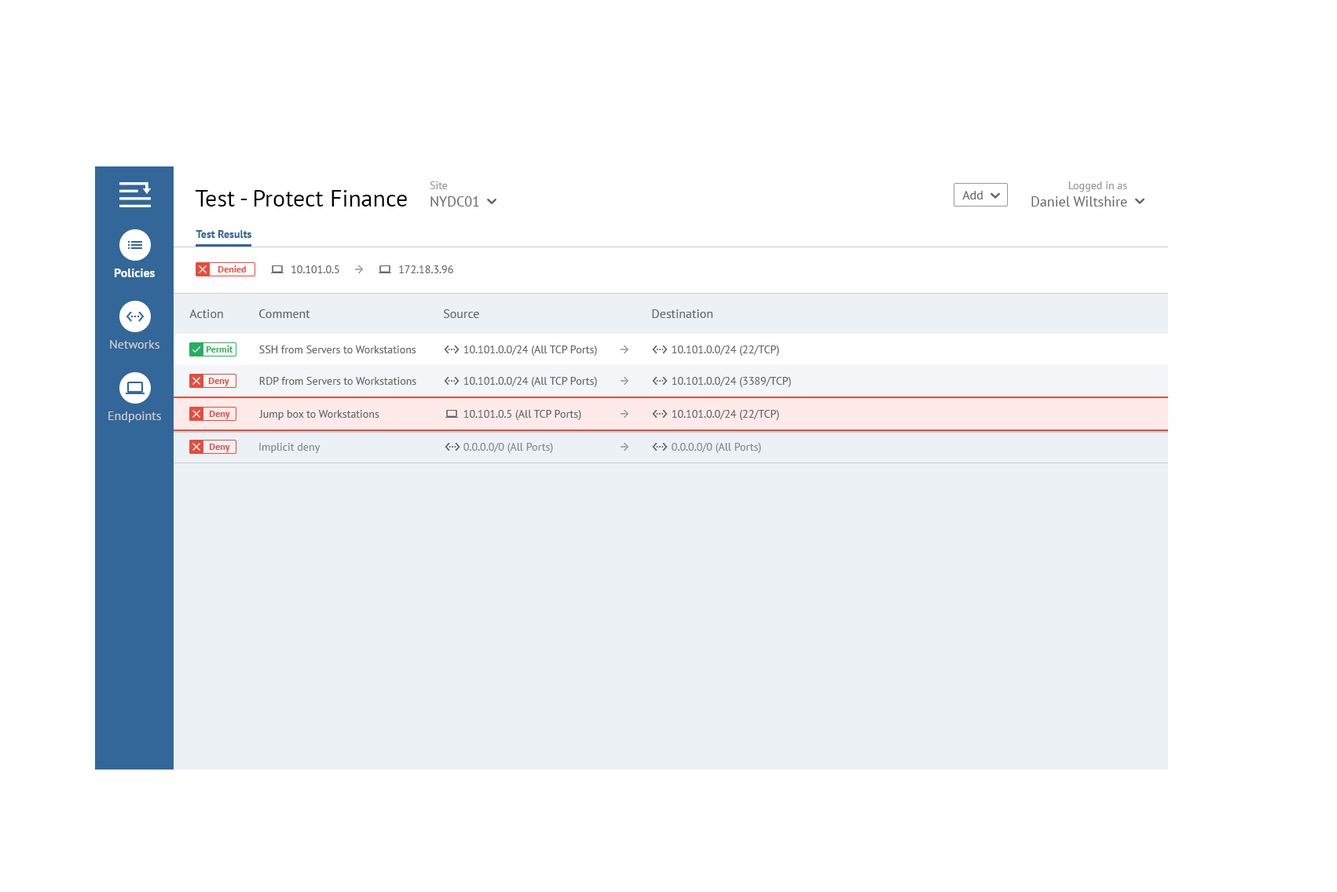
<style>
.page{position:relative;width:1337px;height:892px;background:#ffffff}
.page>*{position:absolute;margin:0}
.t1{font:14.1px "PTSans-Regular";color:#666666}
.t2{font:11px "PTSans-Regular";color:#999999}
.t3{font:14.3px "PTSans-Regular";color:#666666}
.t4{font:11.1px "PTSans-Regular";color:#999999}
.t5{font:23.6px "PTSans-Regular";color:#000000}
.t6{font:12.6px "PTSans-Regular";color:#666666}
.t7{font:10.9px "PTSans-Bold";color:#336699}
.t8{font:12.6px "PTSans-Bold";color:#ffffff}
.t9{font:9.4px "PTSans-Bold";color:#e74c3c}
.t10{font:11px "PTSans-Regular";color:#666666}
.t11{font:12.6px "PTSans-Regular";color:#cccccc}
.t12{font:9.4px "PTSans-Bold";color:#27ae60}
.t13{font:11px "PTSans-Regular";color:#888888}
</style>
<div class="page">
<p class="t1" style="left:430px;top:181px;width:49px;height:26px"><span class="t2">Site<br></span>NYDC01</p>
<p class="t3" style="left:1031px;top:181px;width:96px;height:26px;text-align:right"><span class="t4">Logged in as<br></span>Daniel Wiltshire</p>
<p class="t5" style="left:196px;top:190px;width:211px;height:17px">Test - Protect Finance</p>
<p class="t6" style="left:962px;top:191px;width:20px;height:8px">Add</p>
<p class="t7" style="left:196px;top:230px;width:56px;height:8px">Test Results</p>
<p class="t8" style="left:114px;top:269px;width:41px;height:8px">Policies</p>
<p class="t9" style="left:218px;top:265px;width:28px;height:8px">Denied</p>
<p class="t10" style="left:291px;top:265px;width:48px;height:8px">10.101.0.5</p>
<p class="t10" style="left:399px;top:265px;width:54px;height:8px">172.18.3.96</p>
<p class="t6" style="left:189px;top:309px;width:34px;height:9px">Action</p>
<p class="t6" style="left:259px;top:309px;width:51px;height:9px">Comment</p>
<p class="t6" style="left:443px;top:309px;width:36px;height:9px">Source</p>
<p class="t6" style="left:652px;top:309px;width:60px;height:9px">Destination</p>
<p class="t11" style="left:110px;top:340px;width:49px;height:9px">Networks</p>
<p class="t12" style="left:206px;top:346px;width:27px;height:7px">Permit</p>
<p class="t10" style="left:259px;top:346px;width:157px;height:7px">SSH from Servers to Workstations</p>
<p class="t10" style="left:463px;top:346px;width:134px;height:10px">10.101.0.0/24 (All TCP Ports)</p>
<p class="t10" style="left:671px;top:346px;width:108px;height:10px">10.101.0.0/24 (22/TCP)</p>
<p class="t9" style="left:208px;top:378px;width:21px;height:8px">Deny</p>
<p class="t10" style="left:259px;top:377px;width:157px;height:8px">RDP from Servers to Workstations</p>
<p class="t10" style="left:463px;top:377px;width:134px;height:10px">10.101.0.0/24 (All TCP Ports)</p>
<p class="t10" style="left:671px;top:377px;width:120px;height:10px">10.101.0.0/24 (3389/TCP)</p>
<p class="t11" style="left:108px;top:412px;width:53px;height:11px">Endpoints</p>
<p class="t9" style="left:209px;top:411px;width:21px;height:8px">Deny</p>
<p class="t10" style="left:259px;top:410px;width:120px;height:10px">Jump box to Workstations</p>
<p class="t10" style="left:463px;top:410px;width:118px;height:10px">10.101.0.5 (All TCP Ports)</p>
<p class="t10" style="left:671px;top:410px;width:108px;height:10px">10.101.0.0/24 (22/TCP)</p>
<p class="t9" style="left:209px;top:444px;width:21px;height:8px">Deny</p>
<p class="t13" style="left:259px;top:443px;width:61px;height:10px">Implicit deny</p>
<p class="t13" style="left:463px;top:443px;width:90px;height:10px">0.0.0.0/0 (All Ports)</p>
<p class="t13" style="left:671px;top:443px;width:90px;height:10px">0.0.0.0/0 (All Ports)</p>
</div>
